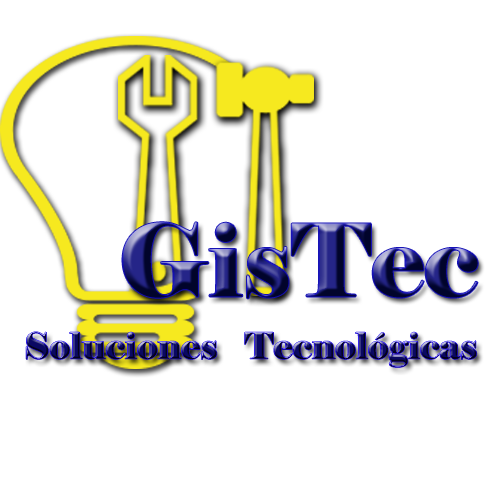
<style>
.page{position:relative;width:500px;height:500px;background:#ffffff}
.page>*{position:absolute;margin:0}
.t1{font:100px "Elephant-Regular"}
.t2{font:36px "Elephant-Regular"}
</style>
<div class="page">
<p class="t1" style="left:122px;top:222px;width:356px;height:77px">GisTec</p>
<p class="t2" style="left:26px;top:332px;width:451px;height:36px">Soluciones   Tecnológicas</p>
</div>
